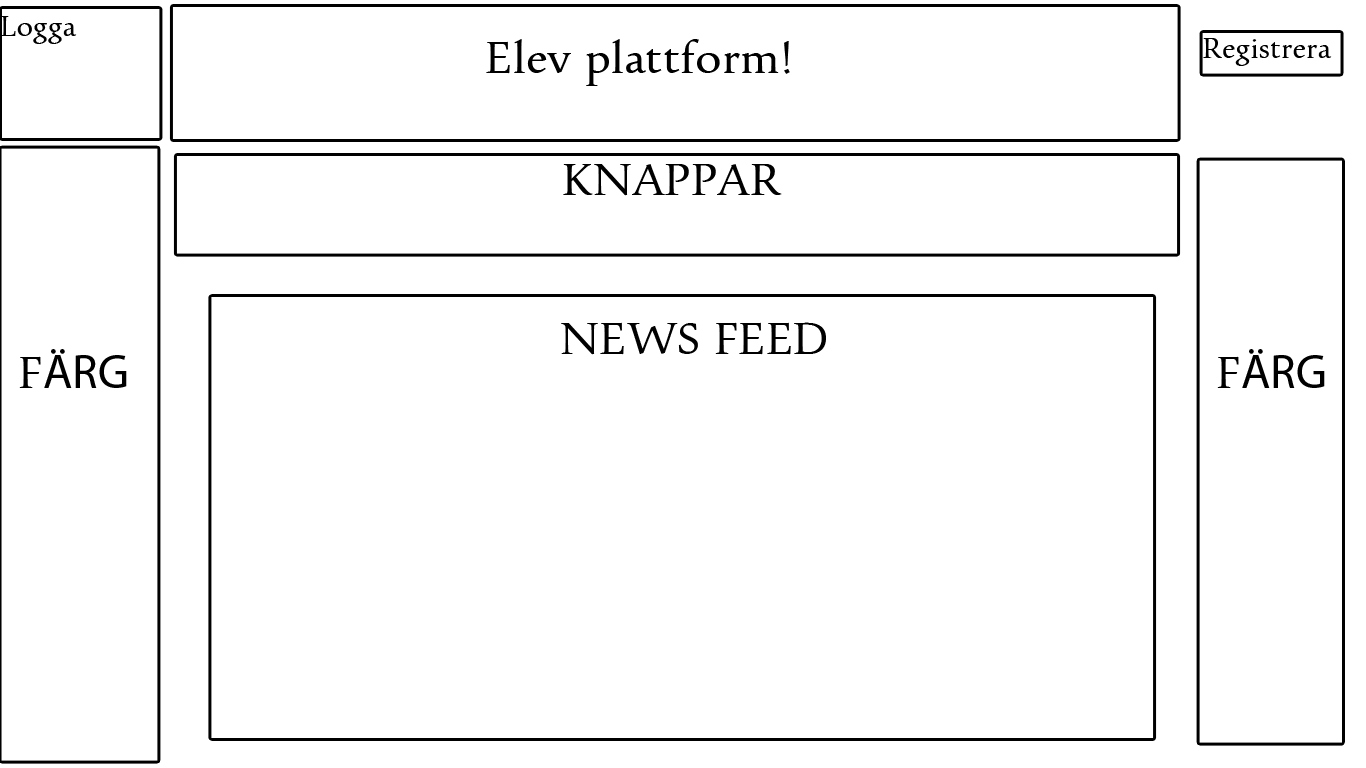
<style>
.page{position:relative;width:1366px;height:768px;background:#ffffff}
.page>*{position:absolute;margin:0}
.t1{font:30px "Pescadero";color:#000000}
.t2{font:48px "Pescadero";color:#000000}
.t3{font:48px "MyriadPro-Regular";color:#000000}
</style>
<div class="page">
<p class="t1" style="left:1px;top:16px;width:76px;height:28px">Logga</p>
<p class="t2" style="left:486px;top:39px;width:304px;height:47px">Elev plattform!</p>
<p class="t1" style="left:1203px;top:38px;width:129px;height:28px">Registrera</p>
<p class="t2" style="left:563px;top:164px;width:219px;height:32px">KNAPPAR</p>
<p class="t2" style="left:561px;top:322px;width:265px;height:33px">NEWS FEED</p>
<p class="t3" style="left:19px;top:349px;width:108px;height:39px"><span class="t2">F</span>ÄRG</p>
<p class="t3" style="left:1217px;top:349px;width:108px;height:39px"><span class="t2">F</span>ÄRG</p>
</div>
